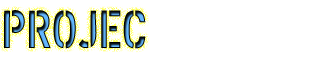
<style>
.page{position:relative;width:320px;height:60px;background:#ffffff}
.page>*{position:absolute;margin:0}
.t1{font:52.7px "XXIISTRAIGHT-ARMY"}
</style>
<div class="page">
<p class="t1" style="left:4px;top:10px;width:142px;height:39px">PROJEC</p>
</div>
